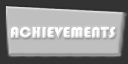
<style>
.page{position:relative;width:128px;height:64px;background:#bfbfbf}
.page>*{position:absolute;margin:0}
.t1{font:16px "Bauhaus93";color:#ffffff}
</style>
<div class="page">
<p class="t1" style="left:10px;top:27px;width:106px;height:12px">ACHIEVEMENTS</p>
</div>
